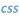
<style>
.page{position:relative;width:19px;height:19px;background:#ffffff}
.page>*{position:absolute;margin:0}
.t1{font:15px "Calibri-BoldItalic";color:#76a6c5}
</style>
<div class="page">
<p class="t1" style="left:1px;top:5px;width:18px;height:8px">css</p>
</div>
